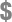
<style>
.page{position:relative;width:12px;height:22px;background:#ffffff}
.page>*{position:absolute;margin:0}
.t1{font:25.2px "HelveticaNeueLTCom-BdCn";color:#7f7f7f}
</style>
<div class="page">
<p class="t1" style="left:0px;top:0px;width:12px;height:22px">$</p>
</div>
